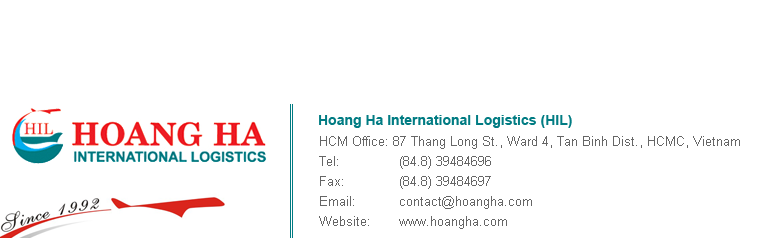
<style>
.page{position:relative;width:767px;height:238px;background:#ffffff}
.page>*{position:absolute;margin:0}
.t1{font:14px "Arial-BoldMT";color:#017c83}
.t2{font:13px/20px "ArialMT";color:#666666}
</style>
<div class="page">
<p class="t1" style="left:319px;top:115px;width:253px;height:13px">Hoang Ha International Logistics (HIL)</p>
<p class="t2" style="left:319px;top:136px;width:421px;height:93px;text-align:justify">HCM Office: 87 Thang Long St., Ward 4, Tan Binh Dist., HCMC, Vietnam<br>Tel:    (84.8) 39484696<br>Fax:    (84.8) 39484697<br>Email:   contact@hoangha.com<br>Website:   www.hoangha.com</p>
</div>
